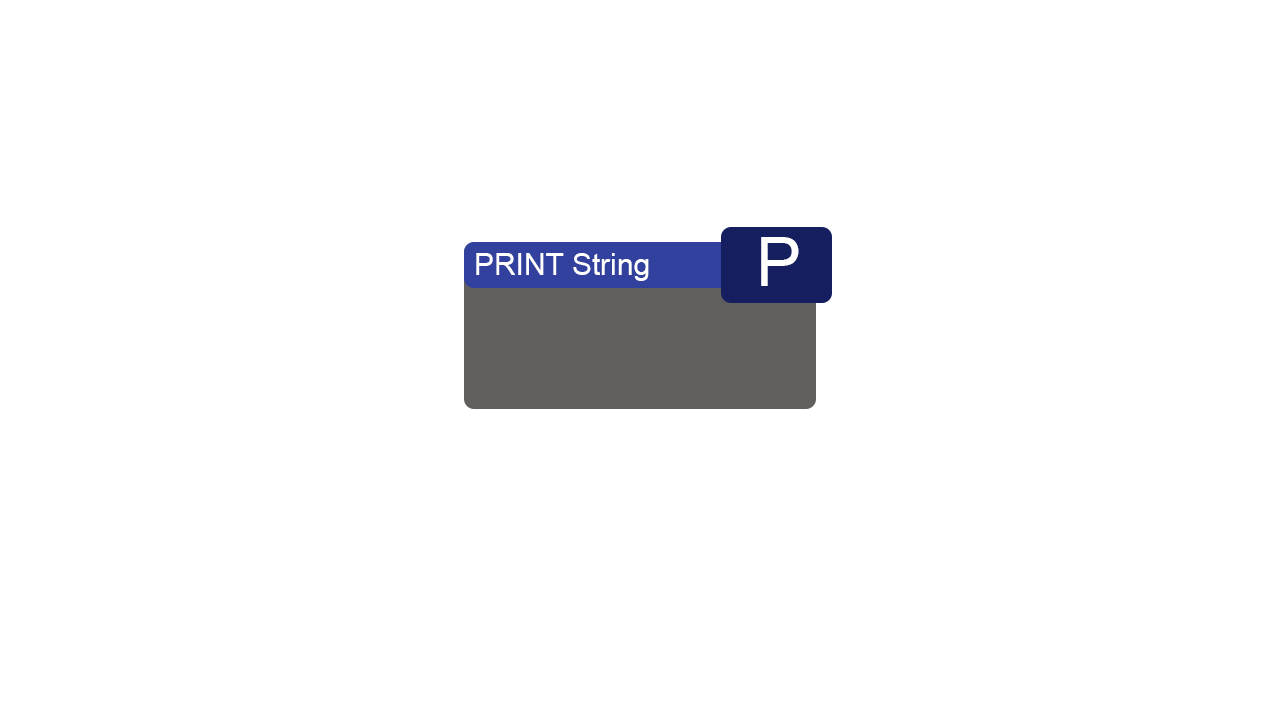
<style>
.page{position:relative;width:1280px;height:720px;background:#ffffff}
.page>*{position:absolute;margin:0}
.t1{font:68.5px "ArialMT";color:#ffffff}
.t2{font:30px "ArialMT";color:#ffffff}
</style>
<div class="page">
<p class="t1" style="left:761px;top:237px;width:38px;height:49px">P</p>
<p class="t2" style="left:476px;top:253px;width:173px;height:28px">PRINT String</p>
</div>
